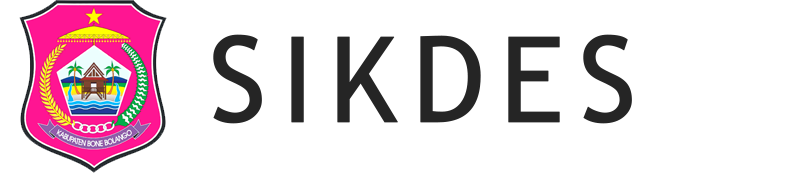
<style>
.page{position:relative;width:800px;height:173px;background:#ffffff}
.page>*{position:absolute;margin:0}
.t1{font:118.8px "TrebuchetMS";letter-spacing:0.1em;color:#252525;font-weight:bold}
</style>
<div class="page">
<p class="t1" style="left:213px;top:34px;width:419px;height:90px">SIKDES</p>
</div>
